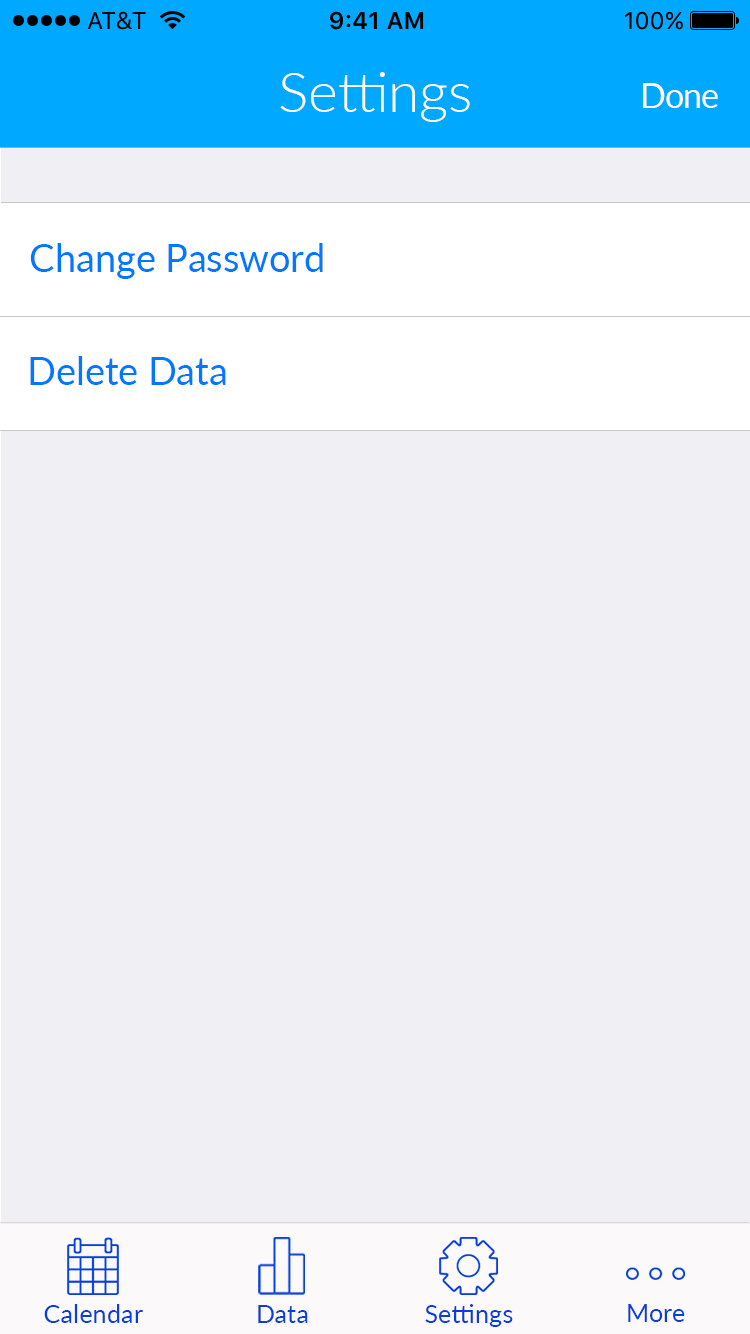
<style>
.page{position:relative;width:750px;height:1334px;background:#efeff4}
.page>*{position:absolute;margin:0}
.t1{font:56.4px "Lato-Light";color:#ffffff}
.t2{font:34px "Lato-Regular";letter-spacing:-0.025em;color:#ffffff}
.t3{font:38px "Lato-Regular";color:#0078ff}
.t4{font:25px "Lato-Regular";letter-spacing:0.01em;color:#083ed9}
</style>
<div class="page">
<p class="t1" style="left:280px;top:72px;width:190px;height:50px">Settings</p>
<p class="t2" style="left:643px;top:83px;width:75px;height:25px">Done</p>
<p class="t3" style="left:30px;top:243px;width:293px;height:36px">Change Password</p>
<p class="t3" style="left:30px;top:356px;width:196px;height:29px">Delete Data</p>
<p class="t4" style="left:44px;top:1304px;width:99px;height:19px">Calendar</p>
<p class="t4" style="left:258px;top:1305px;width:50px;height:18px">Data</p>
<p class="t4" style="left:425px;top:1304px;width:88px;height:23px">Settings</p>
<p class="t4" style="left:628px;top:1304px;width:57px;height:18px">More</p>
</div>
